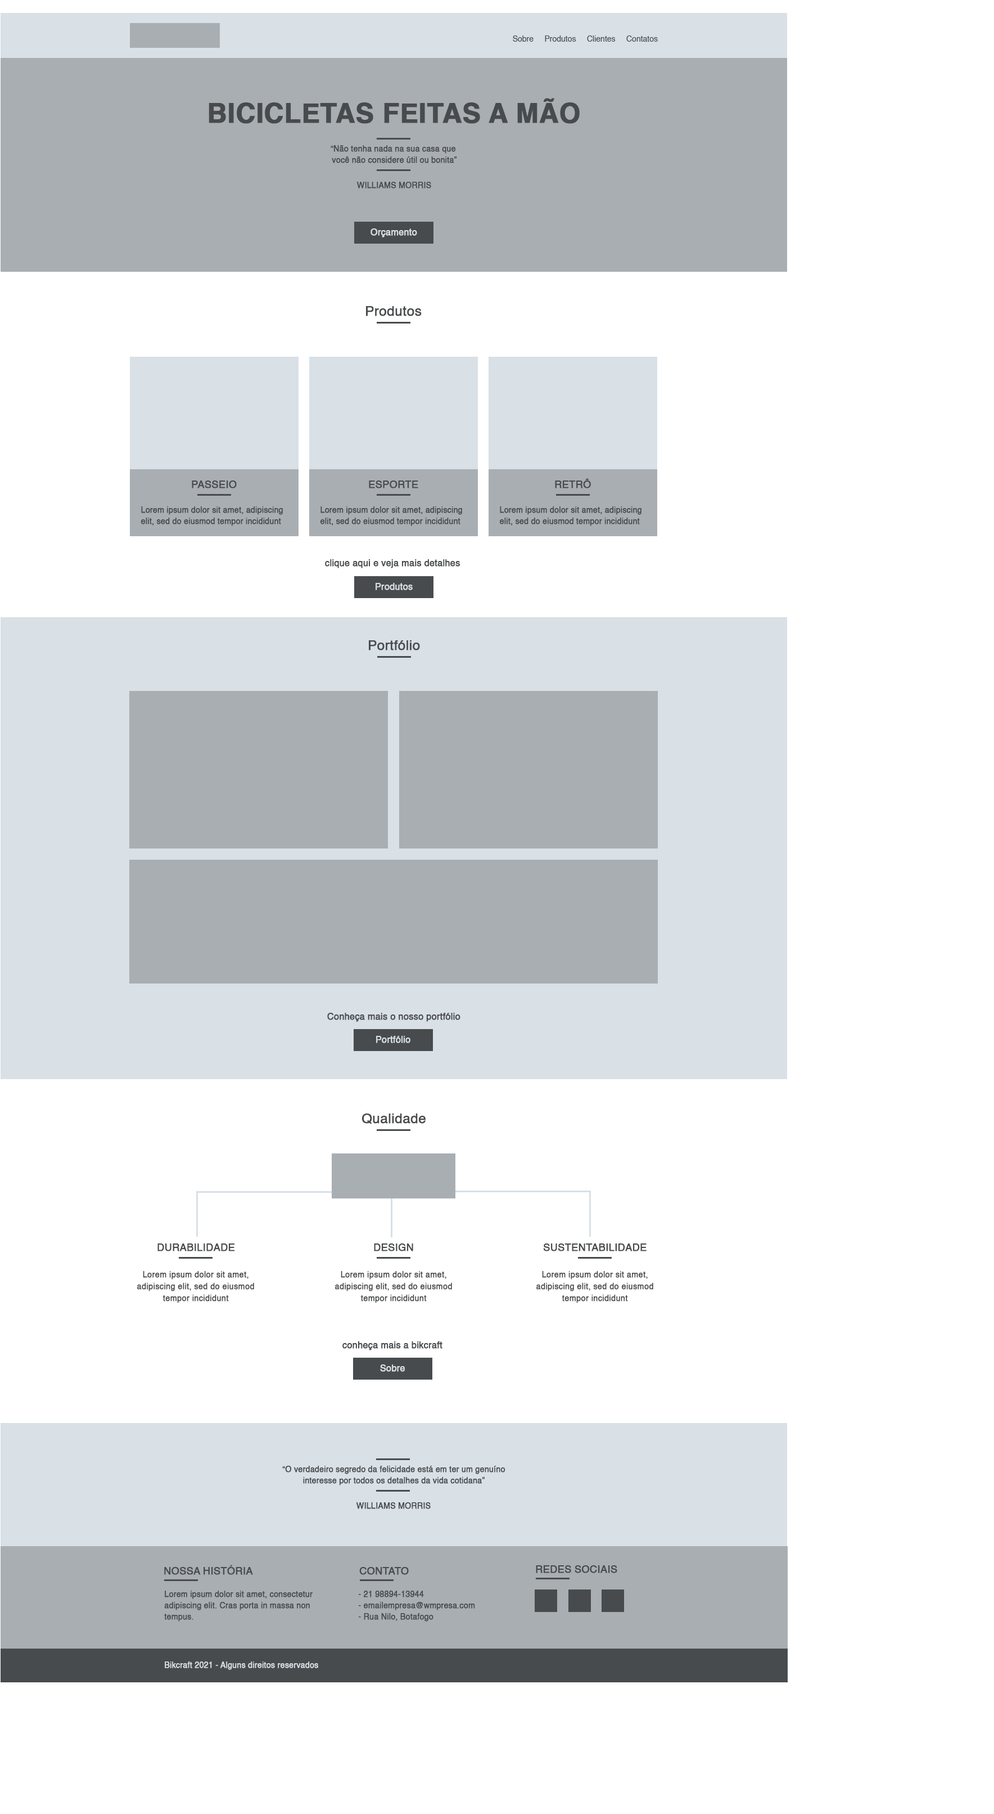
<style>
.page{position:relative;width:994px;height:1814px;background:#ffffff}
.page>*{position:absolute;margin:0}
.t1{font:7.9px "Helvetica";color:#484b4d}
.t2{font:27px "Helvetica-Bold";color:#484b4d;text-transform:uppercase;font-weight:bold}
.t3{font:7.9px/11.2px "Helvetica";color:#484b4d;font-weight:bold}
.t4{font:7.9px/11.2px "Helvetica";color:#484b4d;text-transform:uppercase;font-weight:bold}
.t5{font:7.9px "Helvetica";color:#484b4d;text-transform:uppercase;font-weight:bold}
.t6{font:9px "Helvetica";color:#d9e0e6;font-weight:bold}
.t7{font:13.5px "Helvetica";color:#484b4d;font-weight:bold}
.t8{font:10.1px "Helvetica";color:#484b4d;font-weight:bold}
.t9{font:9px "Helvetica";color:#484b4d;font-weight:bold}
.t10{font:8.1px/11.6px "Helvetica";color:#484b4d;font-weight:bold}
.t11{font:10.1px "Helvetica";color:#484b4d;text-transform:uppercase;font-weight:bold}
.t12{font:7.9px "Helvetica";color:#d9e0e6;font-weight:bold}
</style>
<div class="page">
<p class="t1" style="left:513px;top:35px;width:145px;height:7px">Sobre     Produtos     Clientes     Contatos</p>
<p class="t2" style="left:209px;top:98px;width:371px;height:26px">Bicicletas Feitas a Mão</p>
<p class="t3" style="left:331px;top:145px;width:126px;height:18px;text-align:center"><span class="t4">“</span>Não tenha nada na sua casa que <br>você não considere útil ou bonita”</p>
<p class="t5" style="left:357px;top:182px;width:74px;height:6px">williams morris</p>
<p class="t6" style="left:371px;top:228px;width:46px;height:9px">Orçamento</p>
<p class="t7" style="left:366px;top:306px;width:56px;height:10px">Produtos</p>
<p class="t8" style="left:192px;top:480px;width:45px;height:8px">PASSEIO</p>
<p class="t8" style="left:369px;top:480px;width:49px;height:8px">ESPORTE</p>
<p class="t8" style="left:555px;top:478px;width:36px;height:10px">RETRÔ</p>
<p class="t3" style="left:141px;top:506px;width:142px;height:20px">Lorem ipsum dolor sit amet, adipiscing elit, sed do eiusmod tempor incididunt</p>
<p class="t3" style="left:320px;top:506px;width:142px;height:20px">Lorem ipsum dolor sit amet, adipiscing elit, sed do eiusmod tempor incididunt</p>
<p class="t3" style="left:500px;top:506px;width:142px;height:20px">Lorem ipsum dolor sit amet, adipiscing elit, sed do eiusmod tempor incididunt</p>
<p class="t9" style="left:325px;top:559px;width:135px;height:9px">clique aqui e veja mais detalhes</p>
<p class="t6" style="left:376px;top:583px;width:37px;height:7px">Produtos</p>
<p class="t7" style="left:369px;top:640px;width:51px;height:10px">Portfólio</p>
<p class="t9" style="left:327px;top:1012px;width:134px;height:10px">Conheça mais o nosso portfólio</p>
<p class="t6" style="left:376px;top:1036px;width:35px;height:7px">Portfólio</p>
<p class="t7" style="left:362px;top:1113px;width:64px;height:11px">Qualidade</p>
<p class="t8" style="left:158px;top:1243px;width:77px;height:8px">DURABILIDADE</p>
<p class="t8" style="left:374px;top:1243px;width:39px;height:8px">DESIGN</p>
<p class="t8" style="left:543px;top:1243px;width:104px;height:8px">SUSTENTABILIDADE</p>
<p class="t10" style="left:137px;top:1271px;width:117px;height:32px;text-align:center">Lorem ipsum dolor sit amet, adipiscing elit, sed do eiusmod tempor incididunt</p>
<p class="t10" style="left:335px;top:1271px;width:117px;height:32px;text-align:center">Lorem ipsum dolor sit amet, adipiscing elit, sed do eiusmod tempor incididunt</p>
<p class="t10" style="left:537px;top:1271px;width:117px;height:32px;text-align:center">Lorem ipsum dolor sit amet, adipiscing elit, sed do eiusmod tempor incididunt</p>
<p class="t9" style="left:343px;top:1341px;width:100px;height:9px">conheça mais a bikcraft</p>
<p class="t6" style="left:380px;top:1364px;width:25px;height:7px">Sobre</p>
<p class="t3" style="left:282px;top:1465px;width:224px;height:20px;text-align:center"><span class="t4">“O </span>verdadeiro segredo da felicidade está em ter um genuíno<br>interesse por todos os detalhes da vida cotidana<span class="t4">”</span></p>
<p class="t5" style="left:356px;top:1502px;width:75px;height:7px">williams morris</p>
<p class="t11" style="left:164px;top:1564px;width:89px;height:10px">Nossa história</p>
<p class="t11" style="left:536px;top:1565px;width:82px;height:8px">redes sociais</p>
<p class="t11" style="left:359px;top:1567px;width:50px;height:7px">contato</p>
<p class="t3" style="left:164px;top:1590px;width:149px;height:31px">Lorem ipsum dolor sit amet, consectetur adipiscing elit. Cras porta in massa non tempus.</p>
<p class="t3" style="left:358px;top:1590px;width:117px;height:31px">- 21 98894-13944<br>- emailempresa@wmpresa.com<br>- Rua Nilo, Botafogo</p>
<p class="t12" style="left:165px;top:1661px;width:153px;height:9px">Bikcraft 2021 - Alguns direitos reservados</p>
</div>
